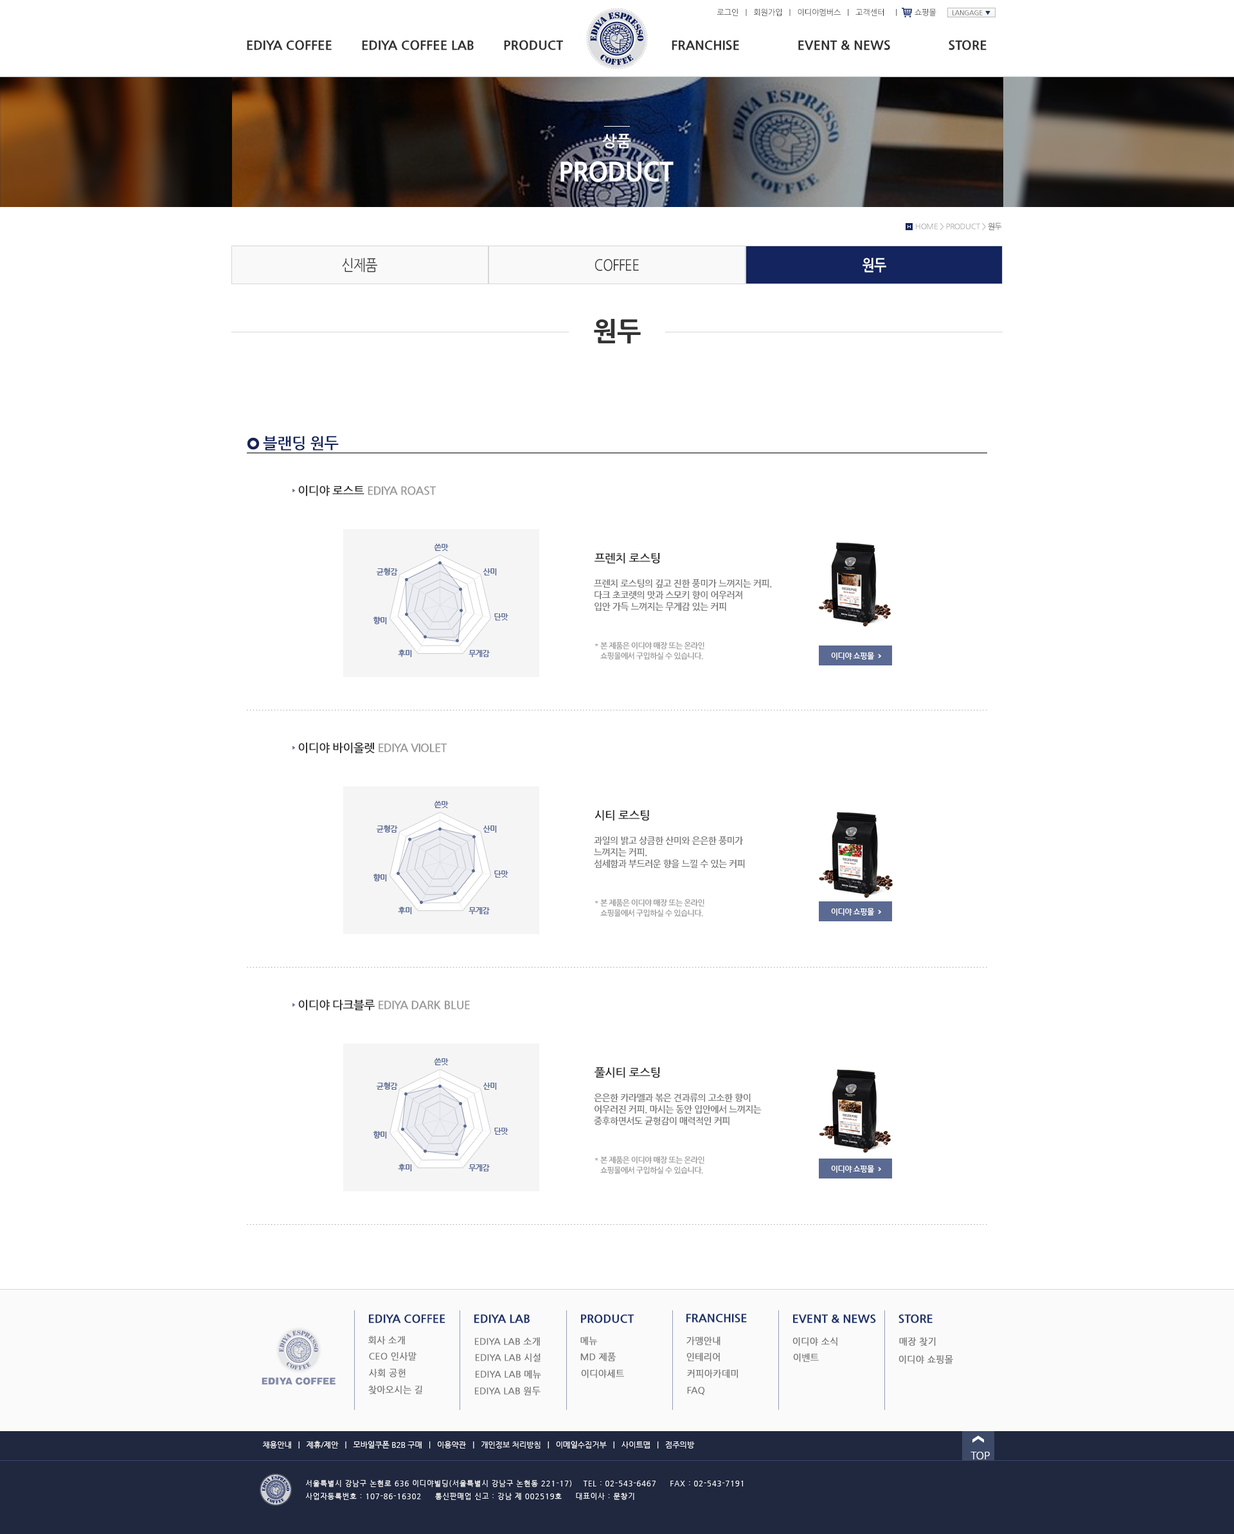
<style>
.page{position:relative;width:1234px;height:1534px;background:#ffffff}
.page>*{position:absolute;margin:0}
.t1{font:7.7px "NanumGothic";color:#333333}
.t2{font:6.4px "NanumGothic";color:#333333}
.t3{font:6.4px "NanumGothic";color:#1d326c}
.t4{font:12.9px "NanumGothicExtraBold";color:#333333}
.t5{font:15.4px "NanumGothicBold";letter-spacing:-0.03em;color:#ffffff}
.t6{font:25.7px "NanumGothicExtraBold";letter-spacing:-0.03em;color:#ffffff}
.t7{font:7.7px "NanumGothic";letter-spacing:-0.03em;color:#989898}
.t8{font:7.7px "NanumGothic";letter-spacing:-0.03em;color:#333333}
.t9{font:15.4px "NanumGothic";letter-spacing:-0.03em;color:#333333;scale:0.85 1}
.t10{font:15.4px "NanumGothicBold";letter-spacing:-0.03em;color:#ffffff;scale:0.85 1}
.t11{font:25.7px "NanumGothicExtraBold";letter-spacing:-0.03em;color:#333333}
.t12{font:15.4px "NanumGothicBold";letter-spacing:-0.03em;color:#13245e}
.t13{font:11.6px "NanumGothicBold";letter-spacing:-0.03em;color:#989898}
.t14{font:11.6px "NanumGothicBold";letter-spacing:-0.03em;color:#333333}
.t15{font:9px/11.6px "NanumGothicBold";letter-spacing:-0.03em;color:#777777}
.t16{font:7.7px/10.3px "NanumGothicBold";letter-spacing:-0.03em;color:#989898}
.t17{font:11.6px "NanumGothicExtraBold";color:#1d326c}
.t18{font:9px "NanumGothic";color:#747474;font-weight:bold}
.t19{font:7.7px "NanumGothic";color:#ffffff}
.t20{font:10.3px "NanumGothic";color:#ffffff}
.t21{font:7.1px/12.9px "NanumGothic";letter-spacing:0.1em;color:#ffffff}
</style>
<div class="page">
<p class="t1" style="left:717px;top:8px;width:220px;height:8px">로그인   |   회원가입   |   이디야멤버스   |   고객센터     |        쇼핑몰</p>
<p class="t2" style="left:953px;top:10px;width:38px;height:5px">LANGAGE <span class="t3">▼</span></p>
<p class="t4" style="left:247px;top:40px;width:740px;height:10px">EDIYA COFFEE        EDIYA COFFEE LAB        PRODUCT                              FRANCHISE                EVENT &amp; NEWS                STORE</p>
<p class="t5" style="left:602px;top:134px;width:29px;height:14px">상품</p>
<p class="t6" style="left:561px;top:161px;width:113px;height:21px">PRODUCT</p>
<p class="t7" style="left:916px;top:222px;width:86px;height:9px">HOME &gt; PRODUCT &gt; <span class="t8">원두</span></p>
<p class="t9" style="left:342px;top:258px;width:35px;height:15px">신제품</p>
<p class="t10" style="left:863px;top:258px;width:24px;height:15px">원두</p>
<p class="t9" style="left:595px;top:259px;width:44px;height:12px">COFFEE</p>
<p class="t11" style="left:594px;top:319px;width:47px;height:25px">원두</p>
<p class="t12" style="left:263px;top:436px;width:76px;height:15px">블랜딩 원두</p>
<p class="t13" style="left:298px;top:485px;width:139px;height:11px"><span class="t14">이디야 로스트 </span>EDIYA ROAST</p>
<p class="t14" style="left:595px;top:553px;width:65px;height:11px">프렌치 로스팅</p>
<p class="t15" style="left:594px;top:579px;width:178px;height:32px">프렌치 로스팅의 깊고 진한 풍미가 느껴지는 커피. <br>다크 초코렛의 맛과 스모키 향이 어우러져 <br>입안 가득 느껴지는 무게감 있는 커피</p>
<p class="t16" style="left:600px;top:642px;width:105px;height:18px">본 제품은 이디야 매장 또는 온라인<br>쇼핑몰에서 구입하실 수 있습니다.</p>
<p class="t13" style="left:298px;top:742px;width:149px;height:11px"><span class="t14">이디야 바이올렛 </span>EDIYA VIOLET</p>
<p class="t14" style="left:595px;top:810px;width:54px;height:11px">시티 로스팅</p>
<p class="t15" style="left:594px;top:836px;width:151px;height:32px">과일의 밝고 상큼한 산미와 은은한 풍미가 <br>느껴지는 커피. <br>섬세함과 부드러운 향을 느낄 수 있는 커피</p>
<p class="t16" style="left:600px;top:899px;width:105px;height:18px">본 제품은 이디야 매장 또는 온라인<br>쇼핑몰에서 구입하실 수 있습니다.</p>
<p class="t13" style="left:298px;top:1000px;width:172px;height:11px"><span class="t14">이디야 다크블루 </span>EDIYA DARK BLUE</p>
<p class="t14" style="left:595px;top:1067px;width:65px;height:11px">풀시티 로스팅</p>
<p class="t15" style="left:594px;top:1094px;width:168px;height:31px">은은한 카라멜과 볶은 견과류의 고소한 향이 <br>어우러진 커피. 마시는 동안 입안에서 느껴지는<br>중후하면서도 균형감이 매력적인 커피</p>
<p class="t16" style="left:600px;top:1156px;width:105px;height:18px">본 제품은 이디야 매장 또는 온라인<br>쇼핑몰에서 구입하실 수 있습니다.</p>
<p class="t17" style="left:687px;top:1313px;width:60px;height:9px">FRANCHISE</p>
<p class="t17" style="left:369px;top:1314px;width:77px;height:9px">EDIYA COFFEE</p>
<p class="t17" style="left:474px;top:1314px;width:56px;height:9px">EDIYA LAB</p>
<p class="t17" style="left:581px;top:1314px;width:53px;height:9px">PRODUCT</p>
<p class="t17" style="left:793px;top:1314px;width:83px;height:9px">EVENT &amp; NEWS</p>
<p class="t17" style="left:899px;top:1314px;width:34px;height:9px">STORE</p>
<p class="t18" style="left:368px;top:1336px;width:37px;height:9px">회사 소개</p>
<p class="t18" style="left:475px;top:1337px;width:65px;height:9px">EDIYA LAB 소개</p>
<p class="t18" style="left:580px;top:1336px;width:18px;height:10px">메뉴</p>
<p class="t18" style="left:687px;top:1336px;width:34px;height:10px">가맹안내</p>
<p class="t18" style="left:793px;top:1337px;width:45px;height:9px">이디야 소식</p>
<p class="t18" style="left:899px;top:1337px;width:37px;height:9px">매장 찾기</p>
<p class="t18" style="left:369px;top:1352px;width:48px;height:9px">CEO 인사말</p>
<p class="t18" style="left:476px;top:1353px;width:65px;height:9px">EDIYA LAB 시설</p>
<p class="t18" style="left:580px;top:1353px;width:36px;height:9px">MD 제품</p>
<p class="t18" style="left:687px;top:1353px;width:33px;height:9px">인테리어</p>
<p class="t18" style="left:793px;top:1353px;width:26px;height:9px">이벤트</p>
<p class="t18" style="left:899px;top:1355px;width:54px;height:9px">이디야 쇼핑몰</p>
<p class="t18" style="left:369px;top:1369px;width:37px;height:9px">사회 공헌</p>
<p class="t18" style="left:476px;top:1370px;width:65px;height:9px">EDIYA LAB 메뉴</p>
<p class="t18" style="left:581px;top:1369px;width:43px;height:9px">이디야세트</p>
<p class="t18" style="left:687px;top:1369px;width:51px;height:9px">커피아카데미</p>
<p class="t18" style="left:368px;top:1385px;width:54px;height:9px">찾아오시는 길</p>
<p class="t18" style="left:475px;top:1387px;width:66px;height:9px">EDIYA LAB 원두</p>
<p class="t18" style="left:687px;top:1387px;width:18px;height:8px">FAQ</p>
<p class="t19" style="left:263px;top:1441px;width:432px;height:7px">채용안내   |   제휴/제안   |   모바일쿠폰 B2B 구매   |   이용약관   |   개인정보 처리방침   |   이메일수집거부   |   사이트맵   |   점주의방</p>
<p class="t20" style="left:971px;top:1452px;width:19px;height:7px">TOP</p>
<p class="t21" style="left:306px;top:1480px;width:437px;height:20px">서울특별시 강남구 논현로 636 이디야빌딩(서울특별시 강남구 논현동 221-17)    TEL : 02-543-6467     FAX : 02-543-7191<br>사업자등록번호 : 107-86-16302     통신판매업 신고 : 강남 제 002519호     대표이사 : 문창기</p>
</div>
